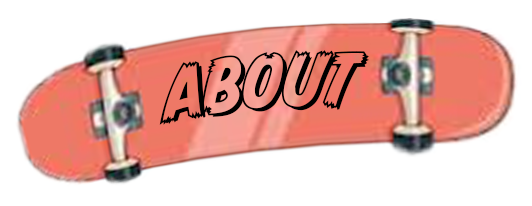
<style>
.page{position:relative;width:532px;height:206px;background:#ffffff}
.page>*{position:absolute;margin:0}
.t1{font:65px "CCMonsterMashOutline";letter-spacing:0.005em;color:#000000;text-transform:uppercase}
</style>
<div class="page">
<p class="t1" style="left:159px;top:50px;width:211px;height:75px;rotate:-5deg">About</p>
</div>
